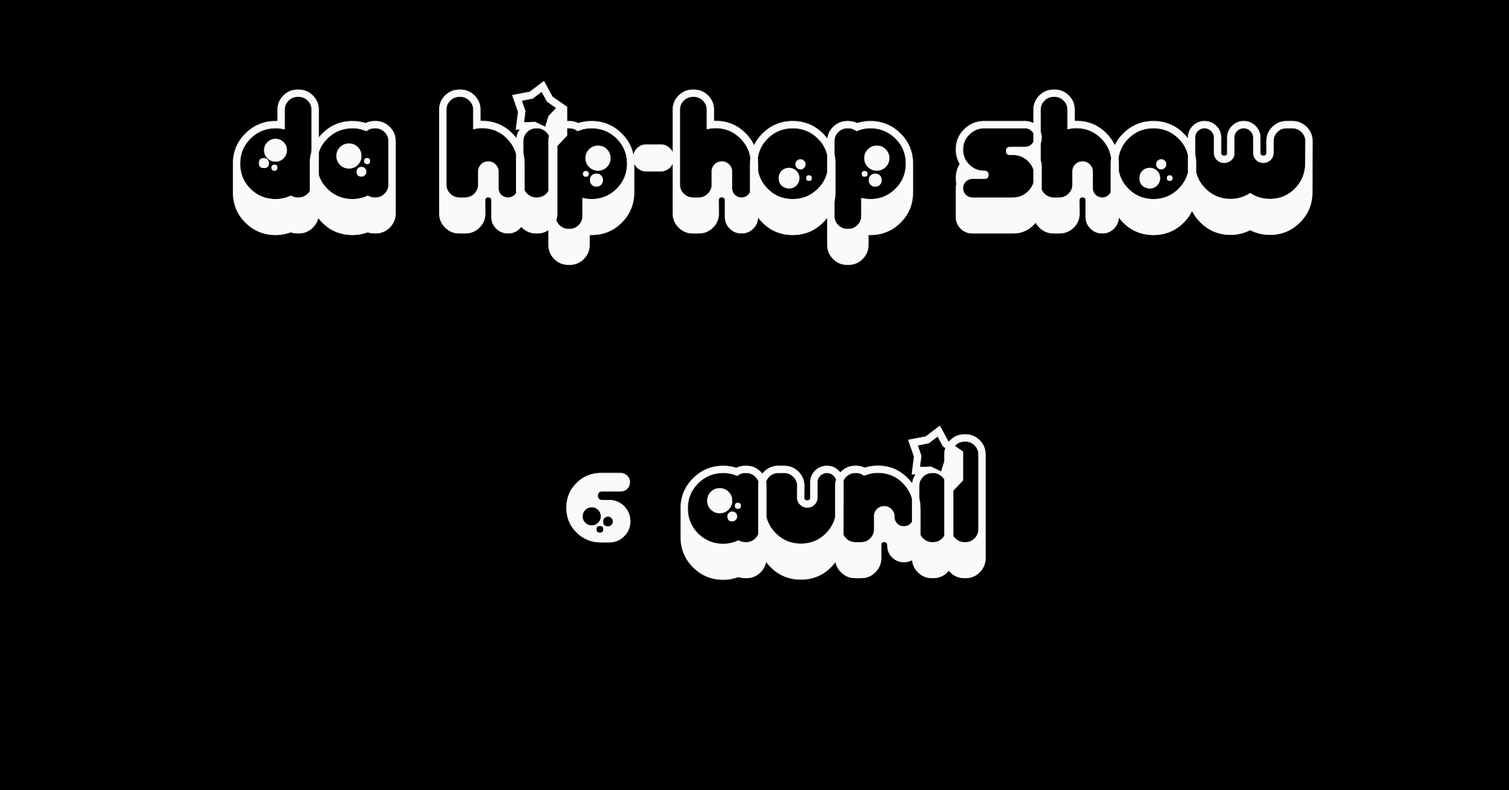
<style>
.page{position:relative;width:1509px;height:790px;background:#000000}
.page>*{position:absolute;margin:0}
.t1{font:143.7px "Billo";color:#fcf9f9}
</style>
<div class="page">
<p class="t1" style="left:233px;top:80px;width:1080px;height:501px;text-align:center">DA HIP-HOP SHOW<br><br>6 AVRIL</p>
</div>
